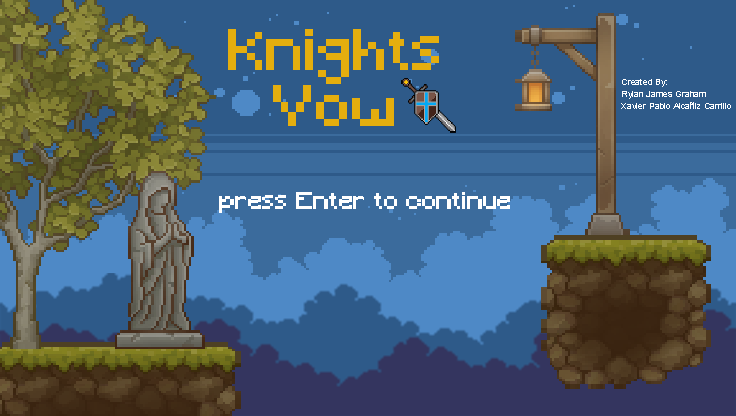
<style>
.page{position:relative;width:736px;height:416px;background:#2e5a89}
.page>*{position:absolute;margin:0}
.t1{font:55.5px/55.5px "Minecraft";color:#e4ae0e;scale:1.11 1}
.t2{font:8px/12px "ArialMT";color:#ffffff;scale:1.11 1}
.t3{font:23.1px "Minecraft";color:#ffffff;scale:1.11 1}
</style>
<div class="page">
<p class="t1" style="left:228px;top:29px;width:211px;height:97px;text-align:center">Knights Vow</p>
<p class="t2" style="left:621px;top:79px;width:110px;height:30px">Created By:<br>Rylan James Graham<br>Xavier Pablo Alcañiz Carrillo</p>
<p class="t3" style="left:219px;top:192px;width:291px;height:21px">press Enter to continue</p>
</div>
